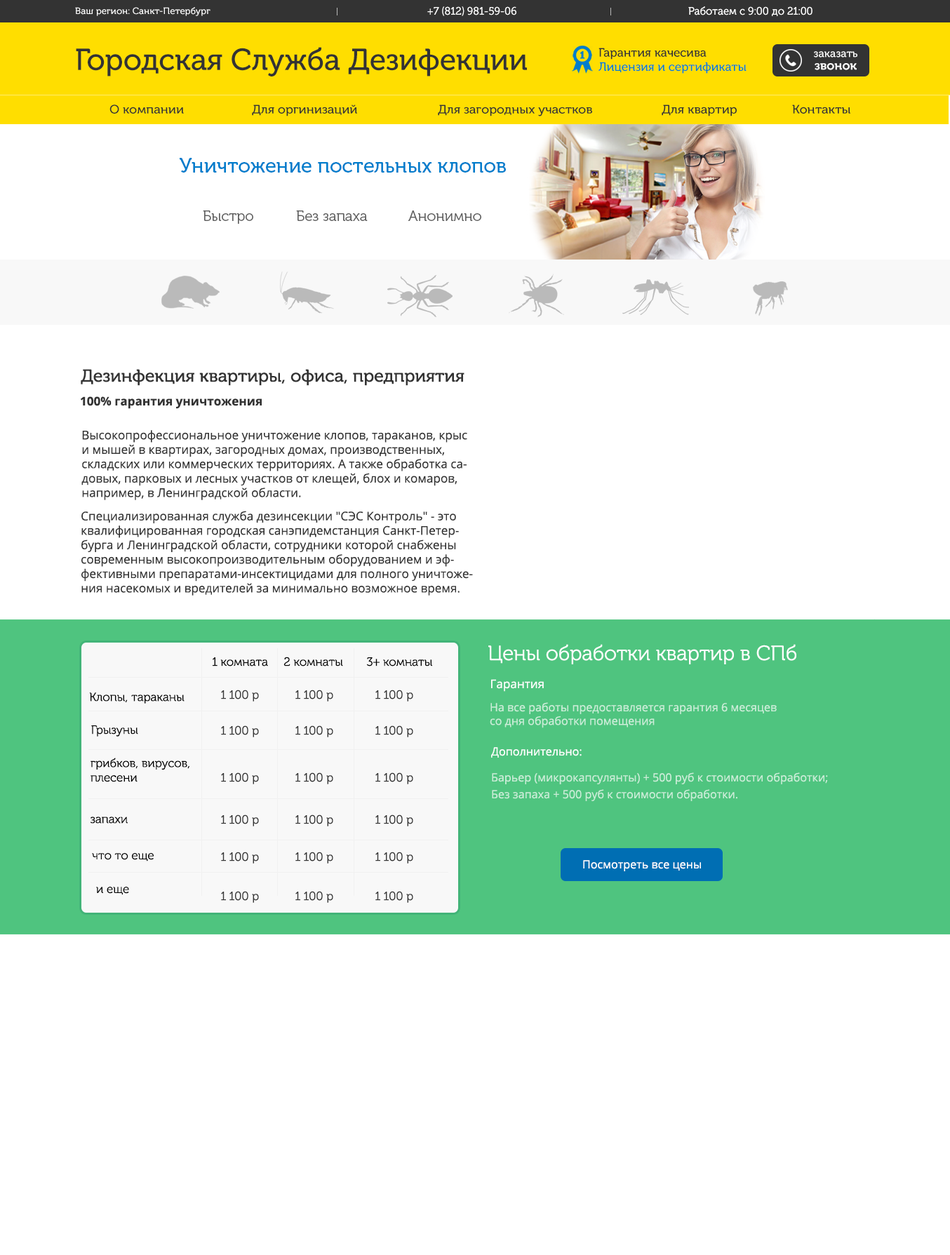
<style>
.page{position:relative;width:950px;height:1255px;background:#ffffff}
.page>*{position:absolute;margin:0}
.t1{font:9.2px "MuseoCyrl-500";color:#ffffff}
.t2{font:11px "MuseoCyrl-500";color:#ffffff;scale:0.96 1}
.t3{font:30.3px "MuseoCyrl-500";color:#333333}
.t4{font:12.1px/14.2px "MuseoCyrl-500";color:#007dcc}
.t5{font:12.1px/14.2px "MuseoCyrl-500";color:#333333}
.t6{font:10.8px/12.6px "MuseoCyrl-500";color:#ffffff}
.t7{font:12.2px/12.6px "MuseoCyrl-700";color:#ffffff}
.t8{font:12.3px "MuseoCyrl-500";color:#333333}
.t9{font:20.7px "MuseoCyrl-500";color:#007dcc}
.t10{font:14.8px "MuseoCyrl-300";color:#5e5e5e}
.t11{font:17.4px "MuseoCyrl-500";color:#333333}
.t12{font:12px "OpenSans-Bold";color:#333333}
.t13{font:12px "OpenSans";color:#333333}
.t14{font:20.7px "MuseoCyrl-300";color:#ffffff}
.t15{font:12px "MuseoCyrl-300";color:#000000}
.t16{font:12px "MuseoCyrl-300";color:#333333}
.t17{font:12px "OpenSans";color:#ffffff}
.t18{font:11.3px "OpenSans";color:#caedd8}
.t19{font:11.3px "OpenSans";color:#ffffff}
.t20{font:11.3px/16.8px "OpenSans";color:#caedd8}
</style>
<div class="page">
<p class="t1" style="left:75px;top:7px;width:135px;height:9px">Ваш регион: Санкт-Петербург</p>
<p class="t2" style="left:427px;top:6px;width:89px;height:10px">+7 (812) 981-59-06</p>
<p class="t2" style="left:688px;top:6px;width:124px;height:10px">Работаем с 9:00 до 21:00</p>
<p class="t3" style="left:76px;top:47px;width:451px;height:29px">Городская Служба Дезифекции</p>
<p class="t4" style="left:598px;top:48px;width:149px;height:26px"><span class="t5">Гарантия качесива<br></span>Лицензия и сертификаты</p>
<p class="t6" style="left:814px;top:51px;width:43px;height:19px;text-align:center">заказать<br><span class="t7">звонок</span></p>
<p class="t8" style="left:109px;top:105px;width:75px;height:9px">О компании</p>
<p class="t8" style="left:252px;top:105px;width:105px;height:11px">Для оргинизаций</p>
<p class="t8" style="left:438px;top:105px;width:154px;height:11px">Для загородных участков</p>
<p class="t8" style="left:662px;top:105px;width:75px;height:11px">Для квартир</p>
<p class="t8" style="left:792px;top:105px;width:58px;height:9px">Контакты</p>
<p class="t9" style="left:180px;top:158px;width:326px;height:15px">Уничтожение постельных клопов</p>
<p class="t10" style="left:203px;top:210px;width:50px;height:14px">Быстро</p>
<p class="t10" style="left:296px;top:210px;width:72px;height:11px">Без запаха</p>
<p class="t10" style="left:408px;top:210px;width:73px;height:11px">Анонимно</p>
<p class="t11" style="left:81px;top:369px;width:383px;height:17px">Дезинфекция квартиры, офиса, предприятия</p>
<p class="t12" style="left:81px;top:396px;width:181px;height:13px">100% гарантия уничтожения</p>
<p class="t13" style="left:81px;top:430px;width:386px;height:70px">Высокопрофессиональное уничтожение клопов, тараканов, крыс и мышей в квартирах, загородных домах, производственных, складских или коммерческих территориях. А также обработка садовых, парковых и лесных участков от клещей, блох и комаров, например, в Ленинградской области.</p>
<p class="t13" style="left:81px;top:511px;width:392px;height:85px">Специализированная служба дезинсекции "СЭС Контроль" - это квалифицированная городская санэпидемстанция Санкт-Петербурга и Ленинградской области, сотрудники которой снабжены современным высокопроизводительным оборудованием и эффективными препаратами-инсектицидами для полного уничтожения насекомых и вредителей за минимально возможное время.</p>
<p class="t14" style="left:488px;top:644px;width:308px;height:20px">Цены обработки квартир в СПб</p>
<p class="t15" style="left:213px;top:657px;width:55px;height:10px">1 комната</p>
<p class="t15" style="left:283px;top:657px;width:60px;height:10px">2 комнаты</p>
<p class="t15" style="left:366px;top:657px;width:66px;height:10px">3+ комнаты</p>
<p class="t16" style="left:221px;top:690px;width:38px;height:12px">1 100 р</p>
<p class="t16" style="left:295px;top:690px;width:38px;height:12px">1 100 р</p>
<p class="t16" style="left:375px;top:690px;width:38px;height:12px">1 100 р</p>
<p class="t17" style="left:491px;top:679px;width:53px;height:13px">Гарантия</p>
<p class="t15" style="left:89px;top:692px;width:96px;height:12px">Клопы, тараканы</p>
<p class="t18" style="left:490px;top:702px;width:287px;height:26px">На все работы предоставляется гарантия 6 месяцев <br>со дня обработки помещения</p>
<p class="t15" style="left:91px;top:725px;width:47px;height:12px">Грызуны</p>
<p class="t16" style="left:221px;top:725px;width:38px;height:12px">1 100 р</p>
<p class="t16" style="left:295px;top:725px;width:38px;height:12px">1 100 р</p>
<p class="t16" style="left:375px;top:725px;width:38px;height:12px">1 100 р</p>
<p class="t19" style="left:491px;top:747px;width:91px;height:11px">Дополнительно:</p>
<p class="t15" style="left:91px;top:758px;width:98px;height:24px">грибков, вирусов, <br>плесени</p>
<p class="t16" style="left:221px;top:772px;width:38px;height:12px">1 100 р</p>
<p class="t16" style="left:295px;top:772px;width:38px;height:12px">1 100 р</p>
<p class="t16" style="left:375px;top:772px;width:38px;height:12px">1 100 р</p>
<p class="t20" style="left:492px;top:772px;width:336px;height:29px">Барьер (микрокапсулянты) + 500 руб к стоимости обработки;<br>Без запаха + 500 руб к стоимости обработки.</p>
<p class="t15" style="left:90px;top:817px;width:38px;height:7px">запахи</p>
<p class="t16" style="left:221px;top:815px;width:38px;height:12px">1 100 р</p>
<p class="t16" style="left:295px;top:815px;width:38px;height:12px">1 100 р</p>
<p class="t16" style="left:375px;top:815px;width:38px;height:12px">1 100 р</p>
<p class="t15" style="left:92px;top:853px;width:62px;height:9px">что то еще</p>
<p class="t16" style="left:221px;top:852px;width:38px;height:12px">1 100 р</p>
<p class="t16" style="left:295px;top:852px;width:38px;height:12px">1 100 р</p>
<p class="t16" style="left:375px;top:852px;width:38px;height:12px">1 100 р</p>
<p class="t19" style="left:583px;top:860px;width:118px;height:11px">Посмотреть все цены</p>
<p class="t15" style="left:96px;top:887px;width:33px;height:8px">и еще</p>
<p class="t16" style="left:221px;top:891px;width:38px;height:12px">1 100 р</p>
<p class="t16" style="left:295px;top:891px;width:38px;height:12px">1 100 р</p>
<p class="t16" style="left:375px;top:891px;width:38px;height:12px">1 100 р</p>
</div>
